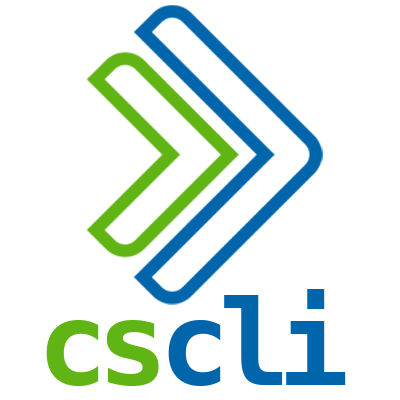
<style>
.page{position:relative;width:400px;height:400px;background:#ffffff}
.page>*{position:absolute;margin:0}
.t1{font:118.1px "MesloLGS-NF-Bold";letter-spacing:-0.1em;color:#0065ab}
.t2{font:118.1px "MesloLGS-NF-Bold";letter-spacing:-0.1em;color:#60b515}
</style>
<div class="page">
<p class="t1" style="left:168px;top:289px;width:178px;height:97px">cli</p>
<p class="t2" style="left:46px;top:320px;width:113px;height:66px">cs</p>
</div>
